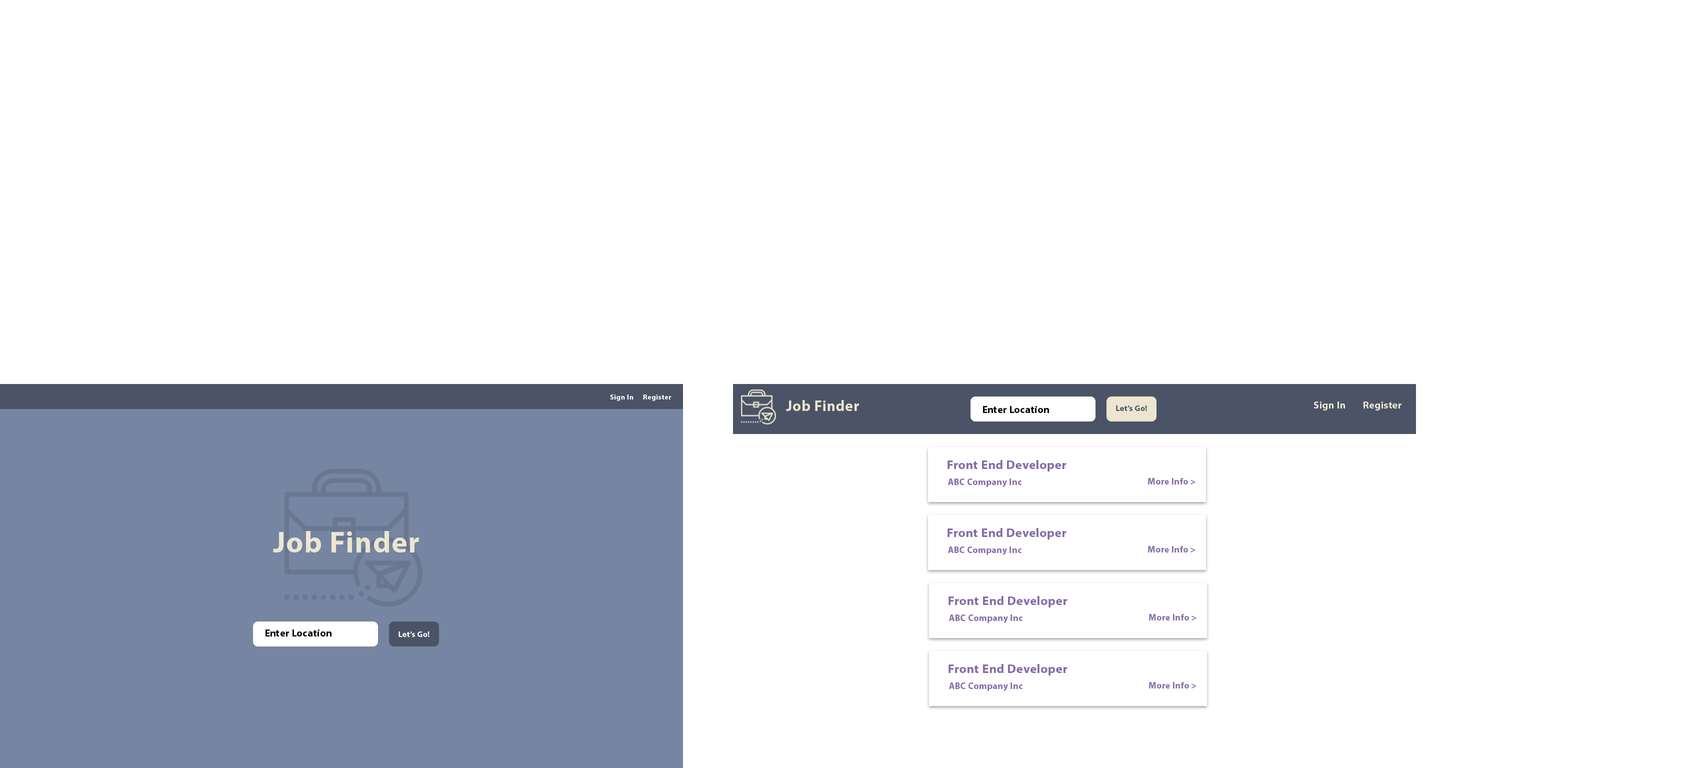
<style>
.page{position:relative;width:1707px;height:768px;background:#ffffff}
.page>*{position:absolute;margin:0}
.t1{font:7.2px "MyriadPro-Bold";letter-spacing:0.025em;color:#ffffff}
.t2{font:15px "MyriadPro-Bold";letter-spacing:0.025em;color:#ece6d0}
.t3{font:10px "MyriadPro-Bold";letter-spacing:0.025em;color:#ece6d0}
.t4{font:10px "MyriadPro-Bold";letter-spacing:0.025em;color:#000000}
.t5{font:8px "MyriadPro-Bold";letter-spacing:0.025em;color:#4b5466}
.t6{font:12.5px "MyriadPro-Bold";letter-spacing:0.025em;color:#846ba7}
.t7{font:9px "MyriadPro-Bold";letter-spacing:0.025em;color:#846ba7}
.t8{font:30px "MyriadPro-Bold";letter-spacing:0.025em;color:#ece6d0}
.t9{font:8px "MyriadPro-Bold";letter-spacing:0.025em;color:#ffffff}
</style>
<div class="page">
<p class="t1" style="left:610px;top:394px;width:62px;height:7px">Sign In Register</p>
<p class="t2" style="left:786px;top:400px;width:73px;height:11px">Job Finder</p>
<p class="t3" style="left:1314px;top:402px;width:88px;height:8px">Sign In  Register</p>
<p class="t4" style="left:983px;top:406px;width:66px;height:7px">Enter Location</p>
<p class="t5" style="left:1116px;top:406px;width:31px;height:5px">Let’s Go!</p>
<p class="t6" style="left:948px;top:460px;width:118px;height:12px">Front End Developer</p>
<p class="t7" style="left:948px;top:478px;width:74px;height:9px">ABC Company Inc</p>
<p class="t7" style="left:1148px;top:478px;width:47px;height:6px">More Info &gt;</p>
<p class="t8" style="left:273px;top:531px;width:146px;height:21px">Job Finder</p>
<p class="t6" style="left:948px;top:528px;width:118px;height:12px">Front End Developer</p>
<p class="t7" style="left:948px;top:546px;width:74px;height:9px">ABC Company Inc</p>
<p class="t7" style="left:1148px;top:546px;width:47px;height:6px">More Info &gt;</p>
<p class="t6" style="left:948px;top:596px;width:120px;height:12px">Front End Developer</p>
<p class="t7" style="left:949px;top:614px;width:73px;height:9px">ABC Company Inc</p>
<p class="t7" style="left:1149px;top:614px;width:47px;height:6px">More Info &gt;</p>
<p class="t4" style="left:266px;top:630px;width:66px;height:6px">Enter Location</p>
<p class="t9" style="left:398px;top:632px;width:32px;height:5px">Let’s Go!</p>
<p class="t6" style="left:948px;top:664px;width:120px;height:12px">Front End Developer</p>
<p class="t7" style="left:949px;top:682px;width:73px;height:9px">ABC Company Inc</p>
<p class="t7" style="left:1149px;top:682px;width:47px;height:6px">More Info &gt;</p>
</div>
